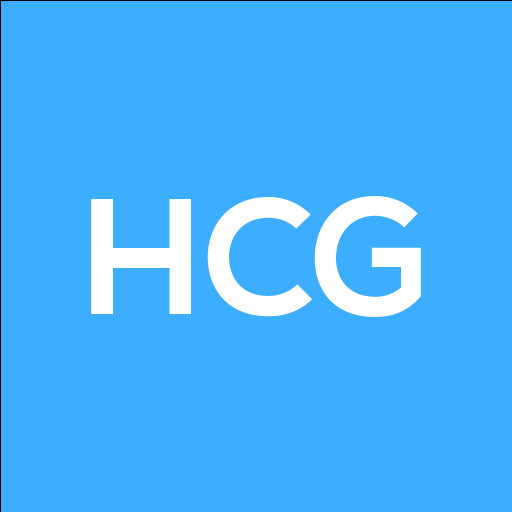
<style>
.page{position:relative;width:512px;height:512px;background:#3daeff}
.page>*{position:absolute;margin:0}
.t1{font:164px "NexaBold";color:#ffffff}
</style>
<div class="page">
<p class="t1" style="left:91px;top:196px;width:330px;height:121px">HCG</p>
</div>
